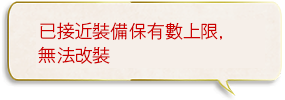
<style>
.page{position:relative;width:285px;height:100px;background:#f6efe9}
.page>*{position:absolute;margin:0}
.t1{font:18px/24px "GothicMB101Pr6N-Light";color:#cc0000}
</style>
<div class="page">
<p class="t1" style="left:38px;top:22px;width:184px;height:42px">已接近裝備保有數上限，<br>無法改裝</p>
</div>
